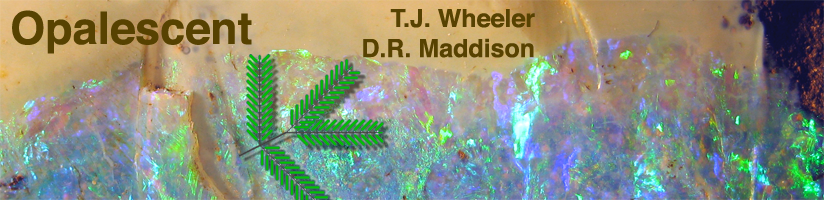
<style>
.page{position:relative;width:824px;height:200px}
.page>*{position:absolute;margin:0}
.t1{font:45px "Helvetica-Bold";color:#574201}
.t2{font:25px "Helvetica-Bold";color:#574201}
</style>
<div class="page">
<p class="t1" style="left:12px;top:10px;width:240px;height:44px">Opalescent</p>
<p class="t2" style="left:363px;top:9px;width:172px;height:49px;text-align:right">T.J. Wheeler<br>D.R. Maddison</p>
</div>
